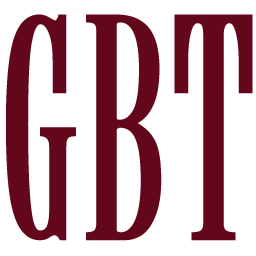
<style>
.page{position:relative;width:256px;height:256px;background:#ffffff}
.page>*{position:absolute;margin:0}
.t1{font:300.7px "Viola";color:#63071c;scale:1.41 1}
</style>
<div class="page">
<p class="t1" style="left:5px;top:14px;width:248px;height:227px">GBT</p>
</div>
